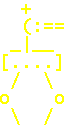
<style>
.page{position:relative;width:64px;height:128px;background:#ffffff}
.page>*{position:absolute;margin:0}
.t1{font:18px/18px "LucidaConsole";color:#ffff00}
</style>
<div class="page">
<p class="t1" style="left:0px;top:4px;width:64px;height:121px">+<br>  (:==<br> _|__<br>[....]<br> /  \<br>o    o<br> \  /</p>
</div>
